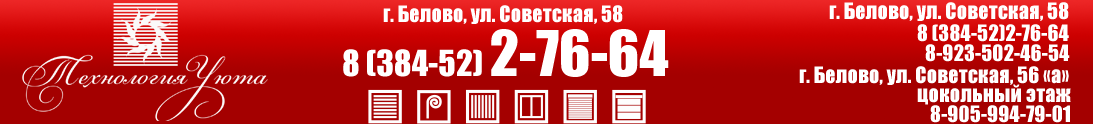
<style>
.page{position:relative;width:1093px;height:124px;background:#a40000}
.page>*{position:absolute;margin:0}
.t1{font:20.8px "Impact";color:#ffffff}
.t2{font:33.3px "Impact";color:#ffffff}
.t3{font:58.3px "Impact";color:#ffffff}
</style>
<div class="page">
<p class="t1" style="left:383px;top:5px;width:240px;height:19px">г. Белово, ул. Советская, 58</p>
<p class="t1" style="left:829px;top:2px;width:240px;height:19px">г. Белово, ул. Советская, 58</p>
<p class="t2" style="left:343px;top:29px;width:326px;height:48px">8 (384-52) <span class="t3">2-76-64</span></p>
<p class="t1" style="left:917px;top:24px;width:152px;height:18px">8 (384-52)2-76-64</p>
<p class="t1" style="left:925px;top:44px;width:145px;height:18px">8-923-502-46-54</p>
<p class="t1" style="left:799px;top:66px;width:270px;height:19px">г. Белово, ул. Советская, 56 «а»</p>
<p class="t1" style="left:917px;top:84px;width:154px;height:21px">цокольный этаж</p>
<p class="t1" style="left:930px;top:105px;width:140px;height:18px">8-905-994-79-01</p>
</div>
